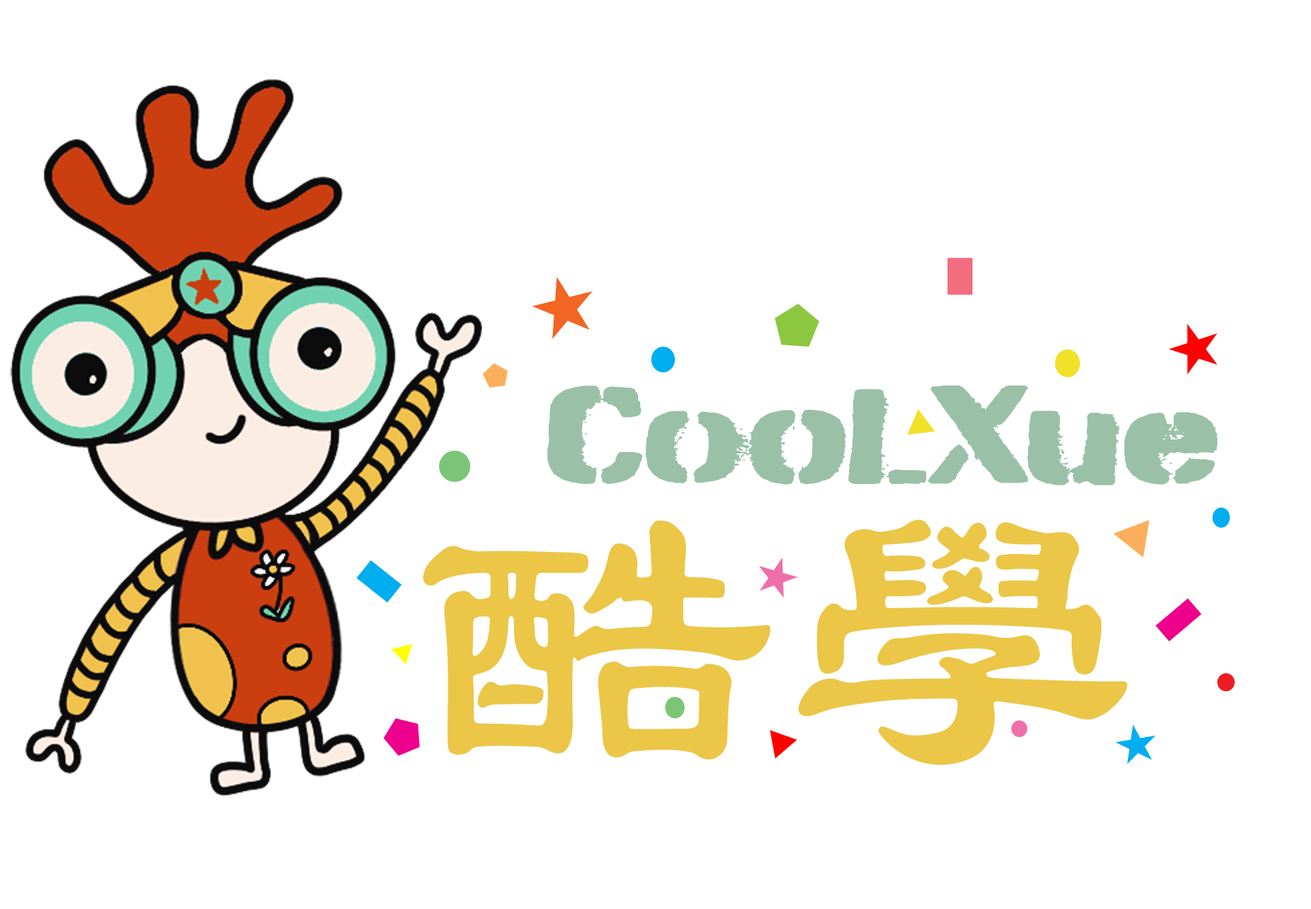
<style>
.page{position:relative;width:1311px;height:909px;background:#ffffff}
.page>*{position:absolute;margin:0}
.t1{font:137.3px "BurnabyStencil-Regular";color:#9ac1a7;scale:1.57 1}
.t2{font:396px "STBaoliTC-Regular";letter-spacing:0.04em;color:#ebc647;scale:0.91 1}
</style>
<div class="page">
<p class="t1" style="left:547px;top:386px;width:671px;height:100px">CooLXue</p>
<p class="t2" style="left:423px;top:520px;width:704px;height:246px">酷學</p>
</div>
